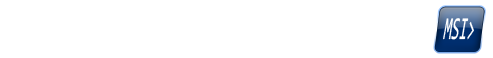
<style>
.page{position:relative;width:493px;height:58px;background:#ffffff}
.page>*{position:absolute;margin:0}
.t1{font:32.3px "Consolas";color:#ffffff;scale:0.43 1}
</style>
<div class="page">
<p class="t1" style="left:443px;top:18px;width:31px;height:22px">MSI&gt;</p>
</div>
